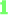
<style>
.page{position:relative;width:8px;height:15px;background:#73ff68}
.page>*{position:absolute;margin:0}
.t1{font:48.3px "FinalFantasyIVSNES";letter-spacing:0.015em;color:#73ff68;scale:0.96 1}
</style>
<div class="page">
<p class="t1" style="left:0px;top:0px;width:8px;height:15px">1</p>
</div>
